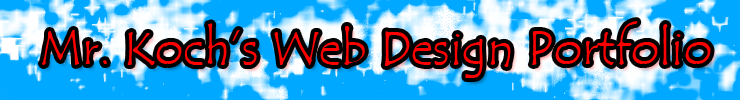
<style>
.page{position:relative;width:740px;height:100px;background:#00a8ff}
.page>*{position:absolute;margin:0}
.t1{font:48.4px "TempusSansITC";color:#ff0000}
</style>
<div class="page">
<p class="t1" style="left:41px;top:21px;width:670px;height:57px">Mr. Koch’s Web Design Portfolio</p>
</div>
